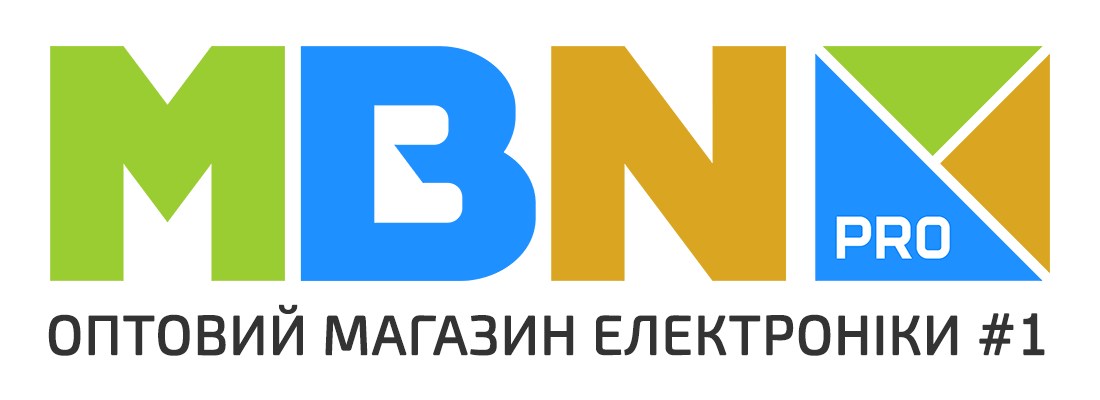
<style>
.page{position:relative;width:1100px;height:400px;background:#ffffff}
.page>*{position:absolute;margin:0}
.t1{font:55px "Exo2-Regular";color:#333333;text-transform:uppercase;font-weight:bold}
.t2{font:55px "Tahoma";color:#333333;text-transform:uppercase;font-weight:bold}
</style>
<div class="page">
<p class="t1" style="left:48px;top:304px;width:997px;height:52px">ОПТОВИЙ маГАЗИН ЕЛЕКТРОНІКИ <span class="t2">#1</span></p>
</div>
